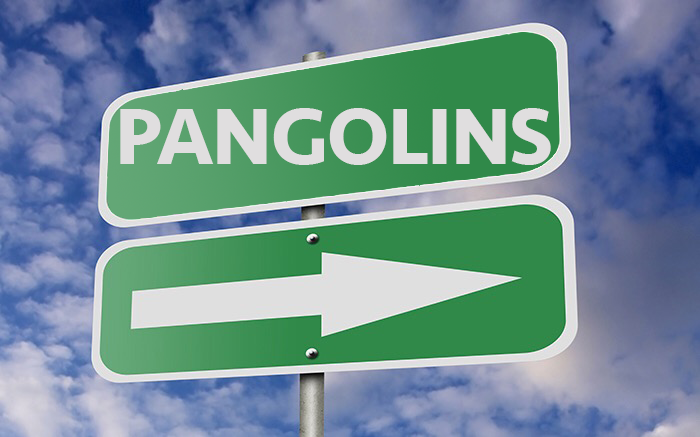
<style>
.page{position:relative;width:700px;height:437px}
.page>*{position:absolute;margin:0}
.t1{font:83.3px "Seravek-Bold";letter-spacing:-0.02em;color:#e0dedf}
</style>
<div class="page">
<p class="t1" style="left:120px;top:108px;width:431px;height:57px">PANGOLINS</p>
</div>
